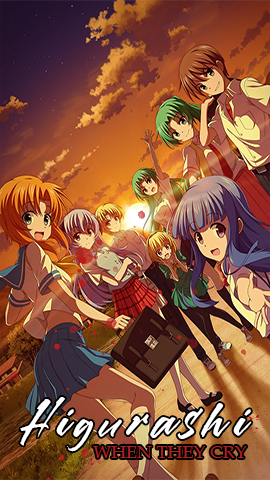
<style>
.page{position:relative;width:270px;height:480px}
.page>*{position:absolute;margin:0}
.t1{font:48px "Callaghands";letter-spacing:0.15em;color:#ffffff}
.t2{font:18px "BookAntiqua";color:#ad1f23}
</style>
<div class="page">
<p class="t1" style="left:20px;top:397px;width:232px;height:55px">Higurashi</p>
<p class="t2" style="left:93px;top:446px;width:154px;height:12px">WHEN THEY CRY</p>
</div>
